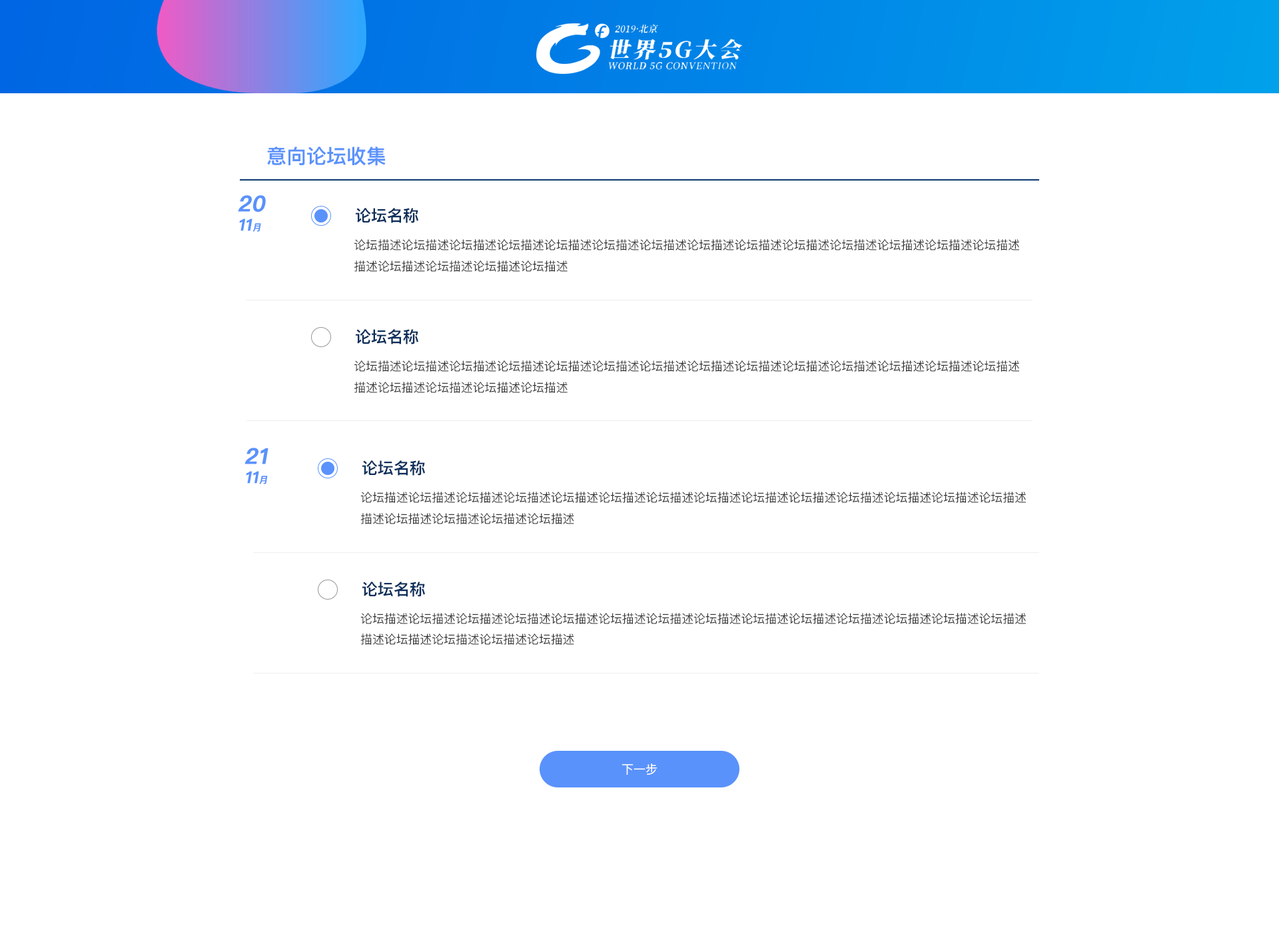
<style>
.page{position:relative;width:1279px;height:932px;background:#ffffff}
.page>*{position:absolute;margin:0}
.t1{font:20px "PingFangSC-Semibold";color:#5a92fb;text-transform:uppercase}
.t2{font:21.7px "PingFangSC-Semibold";color:#5a92fb;font-weight:bold;font-style:italic}
.t3{font:16.3px "PingFangSC-Semibold";color:#5a92fb;font-weight:bold;font-style:italic}
.t4{font:9.1px "PingFangSC-Semibold";color:#5a92fb;font-weight:bold;font-style:italic}
.t5{font:16px "PingFangSC-Semibold";color:#0a2e5b;text-transform:uppercase}
.t6{font:12px/20.8px "PingFangSC-Regular";color:#333333;text-transform:uppercase}
.t7{font:12px "PingFangSC-Regular";color:#ffffff}
</style>
<div class="page">
<p class="t1" style="left:267px;top:147px;width:119px;height:19px">意向论坛收集</p>
<p class="t2" style="left:238px;top:195px;width:28px;height:37px">20<br><span class="t3">11</span><span class="t4">月</span></p>
<p class="t5" style="left:356px;top:208px;width:62px;height:15px">论坛名称</p>
<p class="t6" style="left:354px;top:239px;width:665px;height:33px">论坛描述论坛描述论坛描述论坛描述论坛描述论坛描述论坛描述论坛描述论坛描述论坛描述论坛描述论坛描述论坛描述论坛描述<br>描述论坛描述论坛描述论坛描述论坛描述</p>
<p class="t5" style="left:356px;top:329px;width:62px;height:15px">论坛名称</p>
<p class="t6" style="left:354px;top:360px;width:665px;height:33px">论坛描述论坛描述论坛描述论坛描述论坛描述论坛描述论坛描述论坛描述论坛描述论坛描述论坛描述论坛描述论坛描述论坛描述<br>描述论坛描述论坛描述论坛描述论坛描述</p>
<p class="t2" style="left:245px;top:448px;width:24px;height:36px">21<br><span class="t3">11</span><span class="t4">月</span></p>
<p class="t5" style="left:362px;top:460px;width:63px;height:16px">论坛名称</p>
<p class="t6" style="left:360px;top:492px;width:666px;height:32px">论坛描述论坛描述论坛描述论坛描述论坛描述论坛描述论坛描述论坛描述论坛描述论坛描述论坛描述论坛描述论坛描述论坛描述<br>描述论坛描述论坛描述论坛描述论坛描述</p>
<p class="t5" style="left:362px;top:582px;width:63px;height:15px">论坛名称</p>
<p class="t6" style="left:360px;top:613px;width:666px;height:32px">论坛描述论坛描述论坛描述论坛描述论坛描述论坛描述论坛描述论坛描述论坛描述论坛描述论坛描述论坛描述论坛描述论坛描述<br>描述论坛描述论坛描述论坛描述论坛描述</p>
<p class="t7" style="left:622px;top:764px;width:36px;height:11px">下一步</p>
</div>
